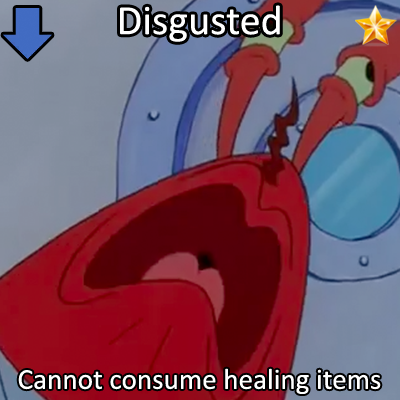
<style>
.page{position:relative;width:400px;height:400px}
.page>*{position:absolute;margin:0}
.t1{font:72px "Calibri";color:#ffffff}
.t2{font:50px "Calibri";color:#ffffff}
</style>
<div class="page">
<p class="t1" style="left:120px;top:5px;width:160px;height:37px">Disgusted</p>
<p class="t2" style="left:18px;top:368px;width:363px;height:26px">Cannot consume healing items</p>
</div>
